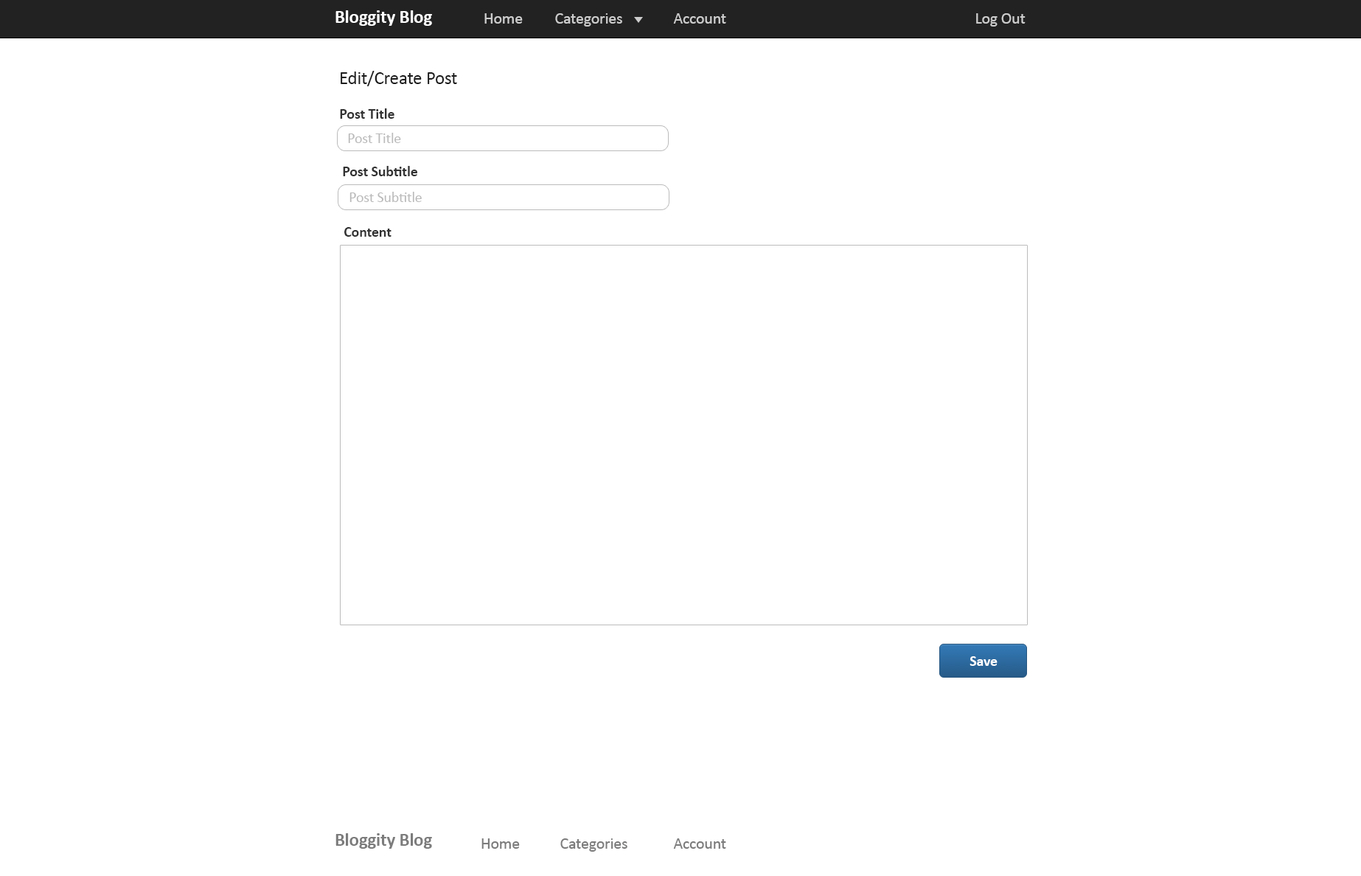
<style>
.page{position:relative;width:1361px;height:876px;background:#ffffff}
.page>*{position:absolute;margin:0}
.t1{font:18.4px "Calibri-Bold";letter-spacing:-0.01em;color:#ffffff}
.t2{font:16.2px "Calibri";letter-spacing:-0.01em;color:#cccccc}
.t3{font:18.4px "Calibri";letter-spacing:-0.01em;color:#1c1c1c}
.t4{font:14.7px "Calibri-Bold";letter-spacing:-0.01em;color:#323232}
.t5{font:14.7px "Calibri";letter-spacing:-0.01em;color:#bbbbbb}
.t6{font:14.7px "Calibri-Bold";letter-spacing:-0.01em;color:#ffffff}
.t7{font:18.4px "Calibri-Bold";letter-spacing:-0.01em;color:#7d7c7c}
.t8{font:16.2px "Calibri";letter-spacing:-0.01em;color:#7d7c7c}
</style>
<div class="page">
<p class="t1" style="left:336px;top:10px;width:96px;height:16px">Bloggity Blog</p>
<p class="t2" style="left:484px;top:13px;width:39px;height:11px">Home</p>
<p class="t2" style="left:555px;top:13px;width:67px;height:14px">Categories</p>
<p class="t2" style="left:673px;top:13px;width:53px;height:11px">Account</p>
<p class="t2" style="left:976px;top:13px;width:50px;height:14px">Log Out</p>
<p class="t3" style="left:341px;top:71px;width:116px;height:15px">Edit/Create Post</p>
<p class="t4" style="left:340px;top:108px;width:54px;height:11px">Post Title</p>
<p class="t5" style="left:348px;top:133px;width:53px;height:10px">Post Title</p>
<p class="t4" style="left:343px;top:166px;width:74px;height:10px">Post Subtitle</p>
<p class="t5" style="left:350px;top:192px;width:72px;height:10px">Post Subtitle</p>
<p class="t4" style="left:344px;top:227px;width:48px;height:10px">Content</p>
<p class="t6" style="left:970px;top:656px;width:28px;height:10px">Save</p>
<p class="t7" style="left:336px;top:833px;width:96px;height:16px">Bloggity Blog</p>
<p class="t8" style="left:482px;top:838px;width:38px;height:11px">Home</p>
<p class="t8" style="left:560px;top:838px;width:68px;height:14px">Categories</p>
<p class="t8" style="left:673px;top:838px;width:53px;height:11px">Account</p>
</div>
